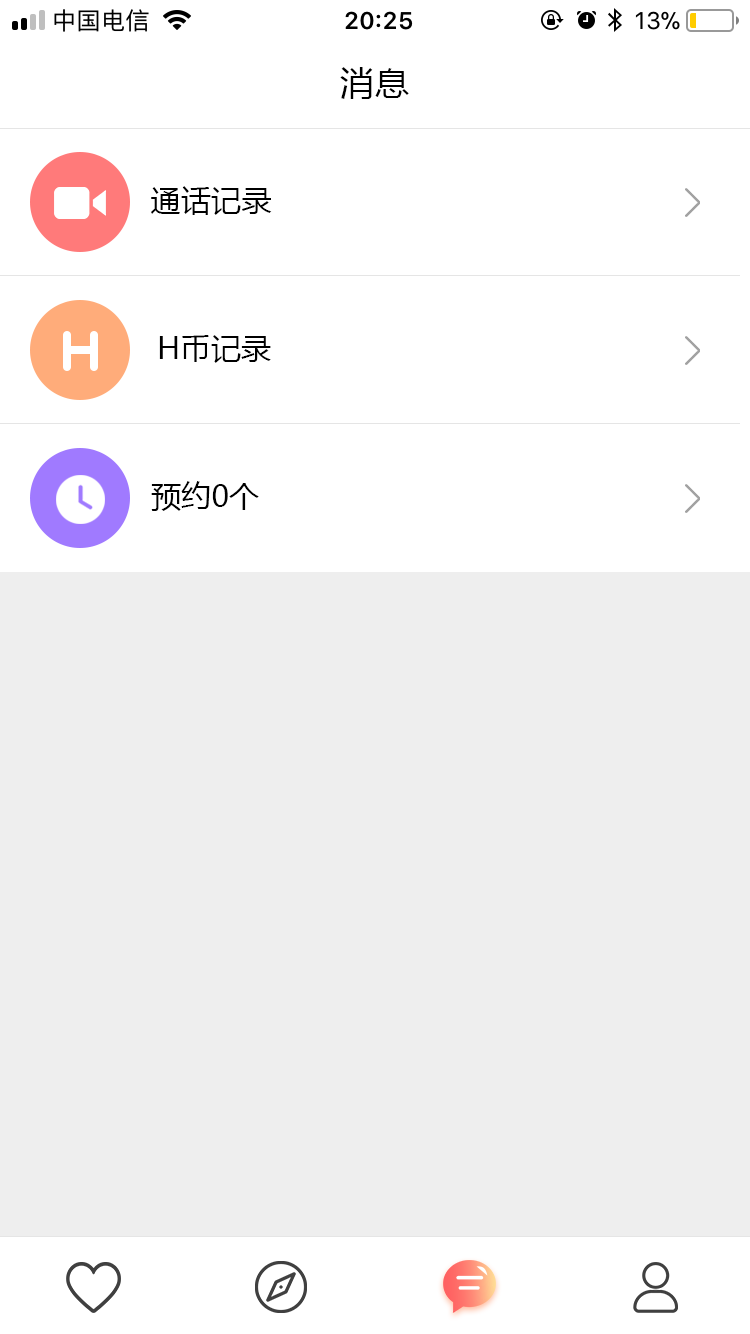
<style>
.page{position:relative;width:750px;height:1334px;background:#eeeeee}
.page>*{position:absolute;margin:0}
.t1{font:34px "MicrosoftYaHei";letter-spacing:0.01em;color:#000000}
.t2{font:30px "MicrosoftYaHei";letter-spacing:0.01em;color:#000000}
</style>
<div class="page">
<p class="t1" style="left:340px;top:67px;width:69px;height:32px">消息</p>
<p class="t2" style="left:151px;top:186px;width:121px;height:29px">通话记录</p>
<p class="t2" style="left:159px;top:335px;width:112px;height:28px">H币记录</p>
<p class="t2" style="left:151px;top:481px;width:108px;height:30px">预约0个</p>
</div>
